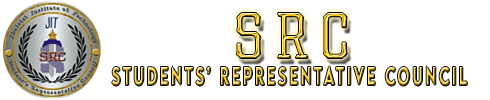
<style>
.page{position:relative;width:490px;height:100px;background:#ffffff}
.page>*{position:absolute;margin:0}
.t1{font:64px "Samton-CondensedLight";letter-spacing:0.2em}
.t2{font:22.4px "LEMONMILK-Medium";letter-spacing:0.2em;scale:0.62 1}
</style>
<div class="page">
<p class="t1" style="left:236px;top:13px;width:111px;height:45px">SRC</p>
<p class="t2" style="left:112px;top:66px;width:355px;height:20px">Students’ Representative Council</p>
</div>
